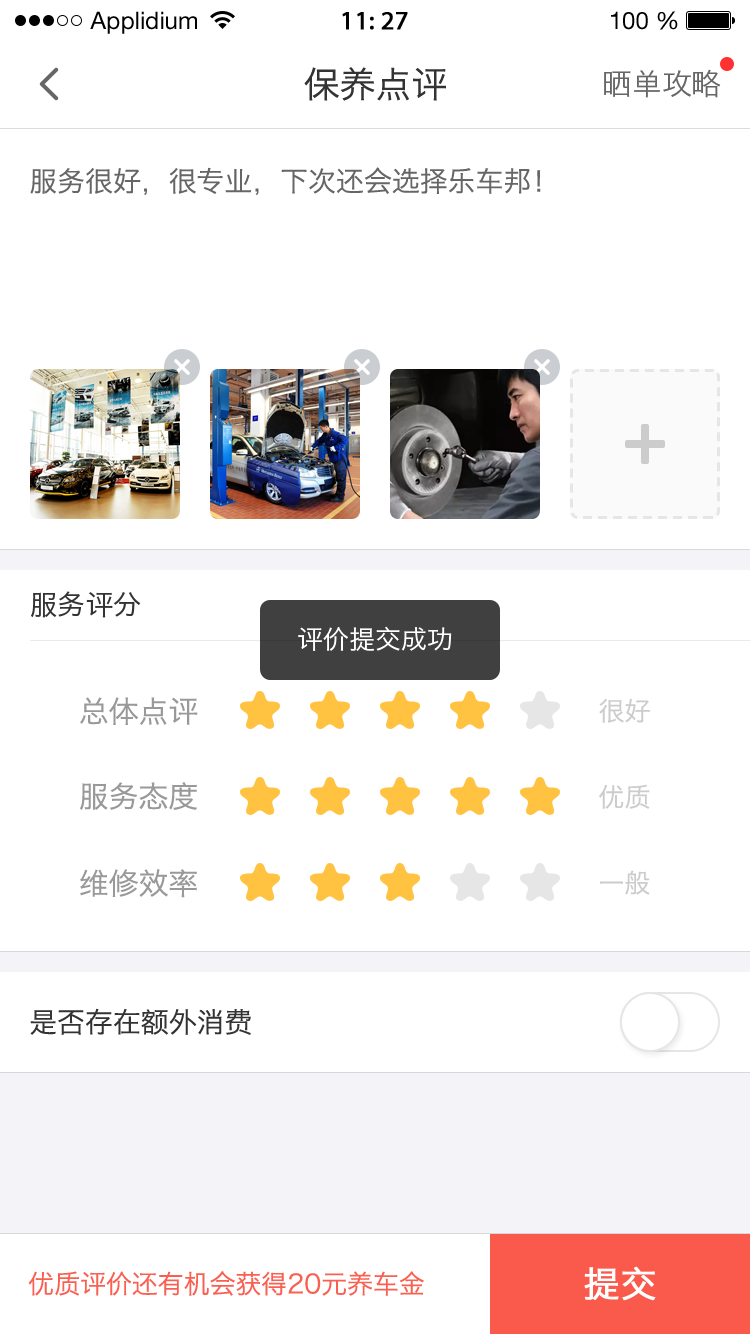
<style>
.page{position:relative;width:750px;height:1334px;background:#ffffff}
.page>*{position:absolute;margin:0}
.t1{font:24px "HelveticaNeueLTStd-Roman";color:#000000}
.t2{font:26px "MyriadPro-Regular";color:#000000;font-weight:bold}
.t3{font:36px "HiraginoSansGB-W3";color:#333333}
.t4{font:30px "HiraginoSansGB-W3";color:#666666}
.t5{font:28px "HiraginoSansGB-W3";color:#666666}
.t6{font:28px "HiraginoSansGB-W3";color:#333333}
.t7{font:26px "HiraginoSansGB-W3";color:#ffffff}
.t8{font:30px "HiraginoSansGB-W3";color:#999999}
.t9{font:26px "HiraginoSansGB-W3";color:#cccccc}
.t10{font:26px "HiraginoSansGB-W3";color:#fa5a4b}
.t11{font:36px "HiraginoSansGB-W3";color:#ffffff;font-weight:bold}
</style>
<div class="page">
<p class="t1" style="left:90px;top:11px;width:107px;height:23px">Applidium</p>
<p class="t2" style="left:342px;top:12px;width:66px;height:18px">11: 27</p>
<p class="t1" style="left:611px;top:11px;width:67px;height:19px">100 %</p>
<p class="t3" style="left:304px;top:67px;width:142px;height:34px">保养点评</p>
<p class="t4" style="left:604px;top:69px;width:117px;height:29px">晒单攻略</p>
<p class="t5" style="left:30px;top:167px;width:511px;height:28px">服务很好，很专业，下次还会选择乐车邦！</p>
<p class="t6" style="left:31px;top:591px;width:110px;height:27px">服务评分</p>
<p class="t7" style="left:298px;top:626px;width:154px;height:25px">评价提交成功</p>
<p class="t8" style="left:80px;top:697px;width:118px;height:28px">总体点评</p>
<p class="t9" style="left:599px;top:698px;width:51px;height:25px">很好</p>
<p class="t8" style="left:80px;top:782px;width:117px;height:28px">服务态度</p>
<p class="t9" style="left:599px;top:784px;width:51px;height:25px">优质</p>
<p class="t8" style="left:80px;top:869px;width:117px;height:29px">维修效率</p>
<p class="t9" style="left:600px;top:870px;width:50px;height:25px">一般</p>
<p class="t6" style="left:30px;top:1008px;width:221px;height:27px">是否存在额外消费</p>
<p class="t10" style="left:28px;top:1271px;width:396px;height:25px">优质评价还有机会获得20元养车金</p>
<p class="t11" style="left:584px;top:1266px;width:72px;height:35px">提交</p>
</div>
